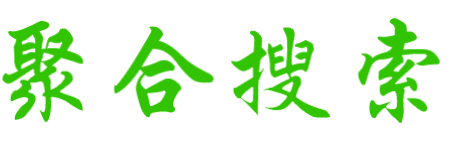
<style>
.page{position:relative;width:450px;height:150px;background:#ffffff}
.page>*{position:absolute;margin:0}
.t1{font:118px "STXingkai";color:#32c303}
</style>
<div class="page">
<p class="t1" style="left:2px;top:18px;width:438px;height:106px">聚合搜索</p>
</div>
